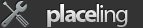
<style>
.page{position:relative;width:143px;height:28px;background:#333333}
.page>*{position:absolute;margin:0}
.t1{font:25px "MyriadPro-Bold";letter-spacing:-0.08em;color:#dadada}
.t2{font:25px "MyriadPro-Regular";letter-spacing:-0.08em;color:#dadada}
</style>
<div class="page">
<p class="t1" style="left:47px;top:4px;width:81px;height:23px">place<span class="t2">ling</span></p>
</div>
